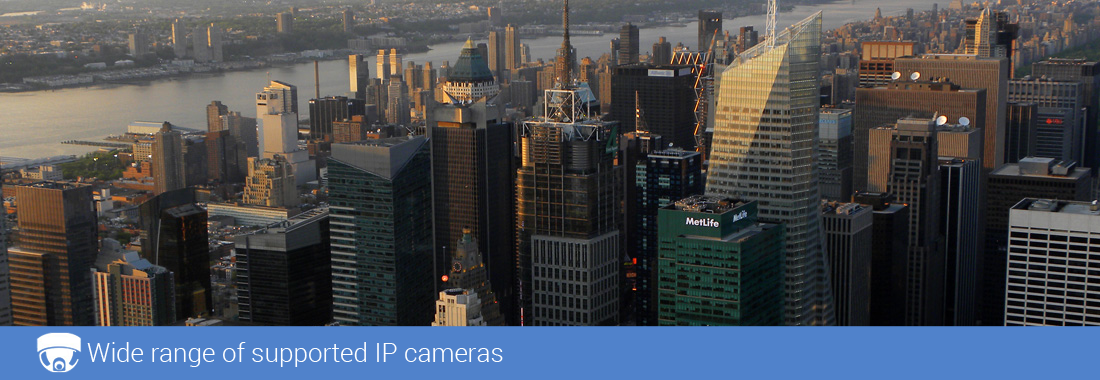
<style>
.page{position:relative;width:1100px;height:380px}
.page>*{position:absolute;margin:0}
.t1{font:26px "Roboto-Light";color:#ffffff}
</style>
<div class="page">
<p class="t1" style="left:87px;top:342px;width:416px;height:25px">Wide range of supported IP cameras</p>
</div>
